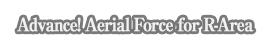
<style>
.page{position:relative;width:271px;height:48px;background:#ffffff}
.page>*{position:absolute;margin:0}
.t1{font:18px "RyuminPro-ExBold";letter-spacing:-0.08em;color:#f1f1f1;font-weight:bold;scale:0.9 1}
</style>
<div class="page">
<p class="t1" style="left:17px;top:17px;width:237px;height:15px">Advance! Aerial Force for R-Area</p>
</div>
